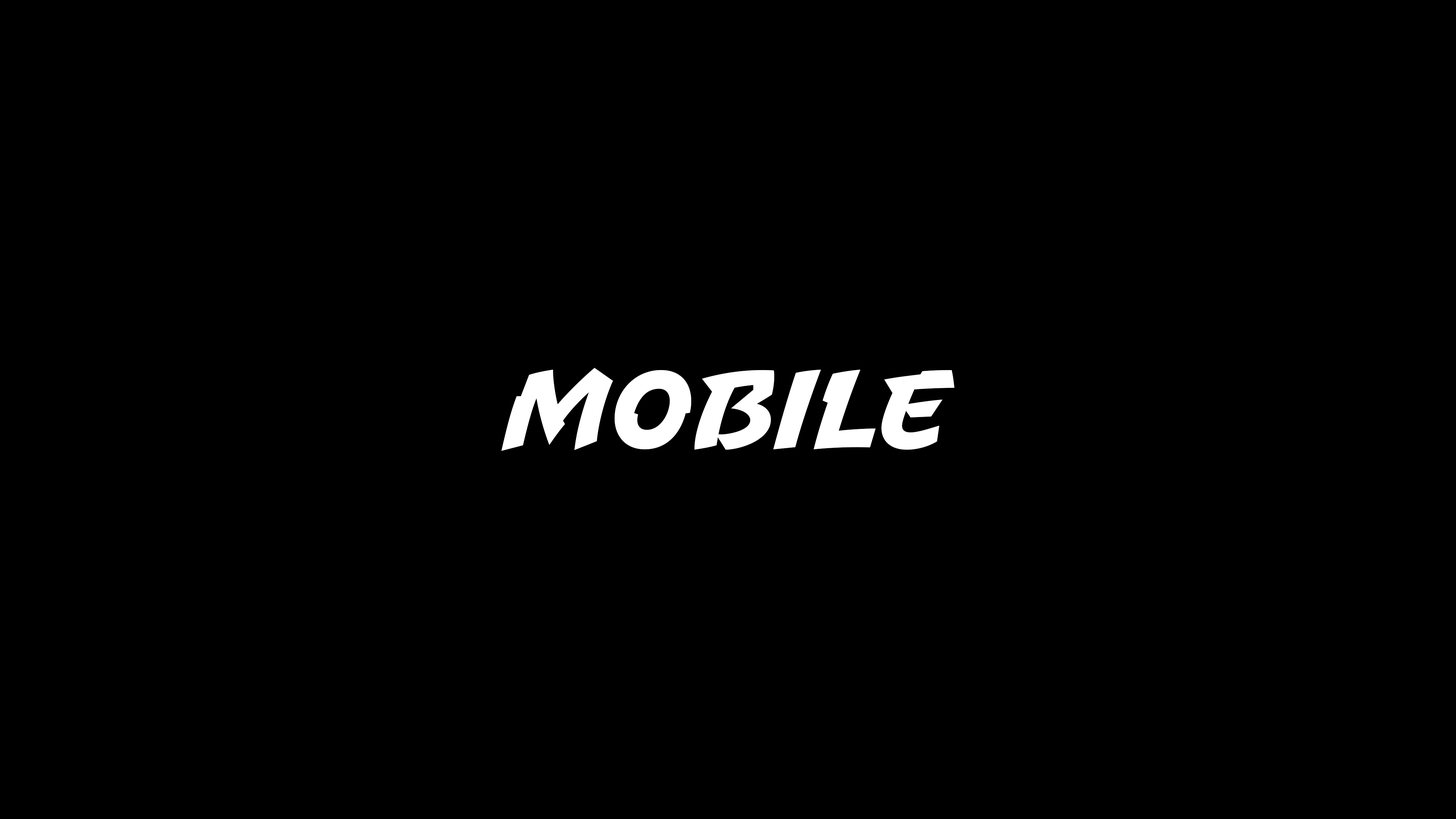
<style>
.page{position:relative;width:1456px;height:819px;background:#000000}
.page>*{position:absolute;margin:0}
.t1{font:113.7px "UppercutAngle";color:#ffffff}
</style>
<div class="page">
<p class="t1" style="left:501px;top:368px;width:453px;height:83px">Mobile</p>
</div>
